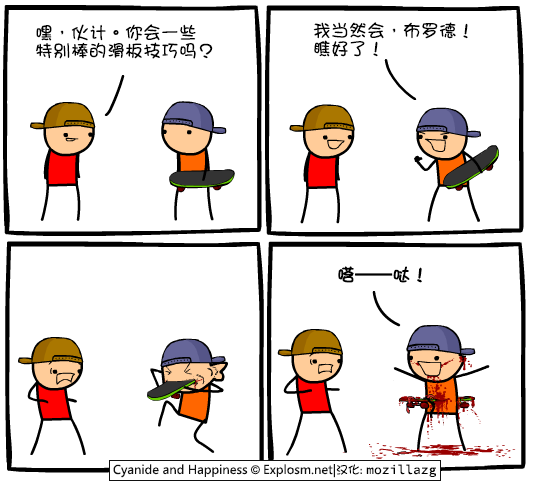
<style>
.page{position:relative;width:540px;height:500px;background:#ffffff}
.page>*{position:absolute;margin:0}
.t1{font:18px/18px "DFGirl";color:#000000}
.t2{font:18px "DFGirl";color:#000000;font-weight:bold}
</style>
<div class="page">
<p class="t1" style="left:36px;top:24px;width:177px;height:35px">嘿，伙计。你会一些<br>特别棒的滑板技巧吗？</p>
<p class="t1" style="left:313px;top:22px;width:155px;height:35px">我当然会，布罗德！<br>瞧好了！</p>
<p class="t2" style="left:338px;top:266px;width:84px;height:17px">嗒——哒！</p>
</div>
